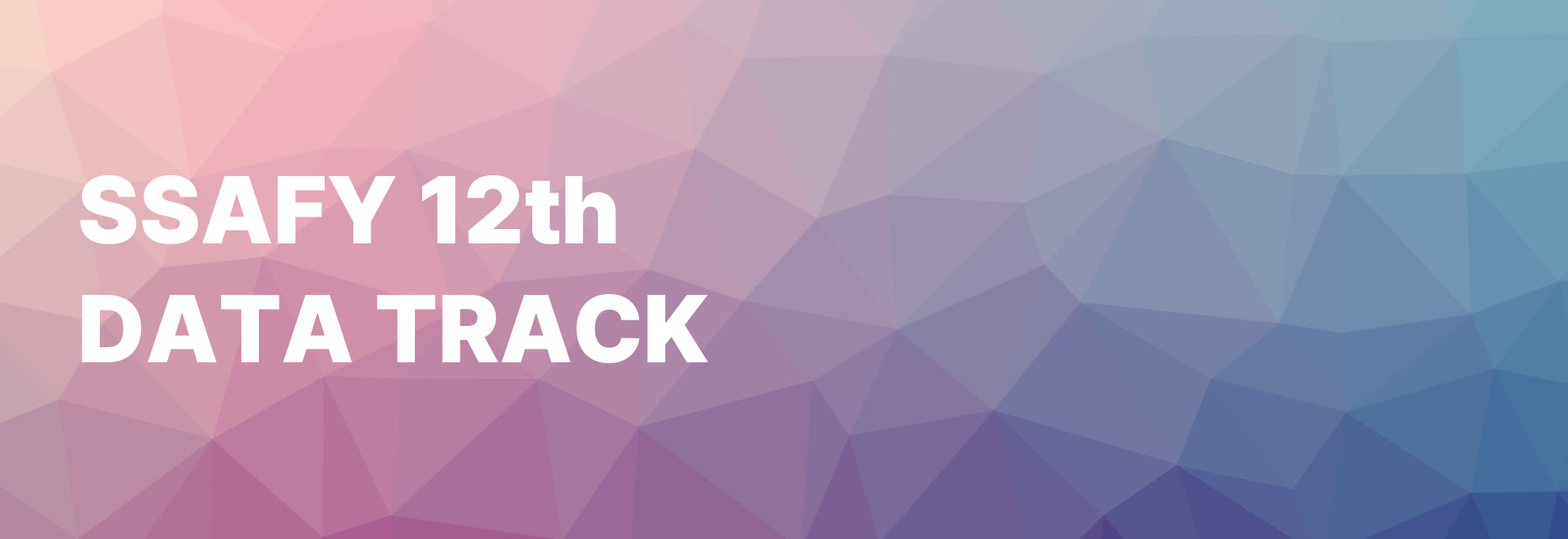
<style>
.page{position:relative;width:1568px;height:539px}
.page>*{position:absolute;margin:0}
.t1{font:95px/118.8px "Pretendard-Black";color:#ffffff}
</style>
<div class="page">
<p class="t1" style="left:80px;top:174px;width:629px;height:189px">SSAFY 12th<br>DATA TRACK</p>
</div>
